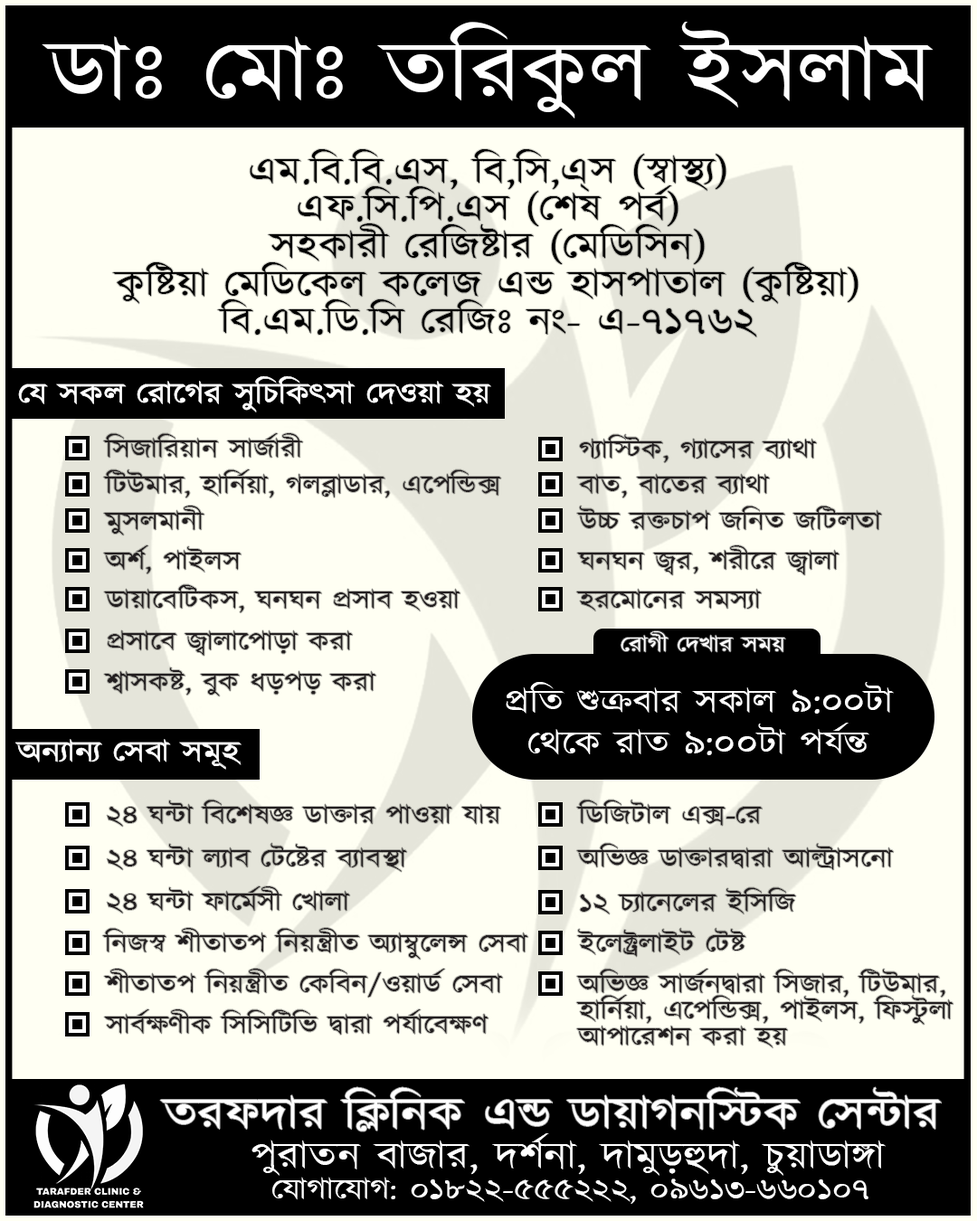
<style>
.page{position:relative;width:977px;height:1221px;background:#fffff3}
.page>*{position:absolute;margin:0}
.t1{font:86.7px "Kalpurush";color:#ffffff;scale:1.16 1}
.t2{font:37.7px/37.7px "Kalpurush";color:#000000;scale:1.16 1}
.t3{font:30.1px "Kalpurush";color:#ffffff;scale:1.16 1}
.t4{font:26.4px "Kalpurush";color:#231f20;scale:1.16 1}
.t5{font:22.6px "Kalpurush";color:#ffffff;scale:1.16 1}
.t6{font:33.9px/41.4px "Kalpurush";color:#ffffff;scale:1.16 1}
.t7{font:26.4px/26.4px "Kalpurush";color:#231f20;scale:1.16 1}
.t8{font:45.2px "Kalpurush";color:#ffffff;scale:1.16 1}
.t9{font:37.7px "Kalpurush";color:#ffffff;scale:1.16 1}
</style>
<div class="page">
<p class="t1" style="left:42px;top:22px;width:891px;height:96px">ডাঃ মোঃ তরিকুল ইসলাম</p>
<p class="t2" style="left:112px;top:149px;width:746px;height:188px;text-align:center">এম.বি.বি.এস, বি,সি,এ্স (স্বাস্থ্য)<br>এফ.সি.পি.এস (শেষ পর্ব)<br>সহকারী রেজিষ্টার (মেডিসিন)<br>কুষ্টিয়া মেডিকেল কলেজ এন্ড হাসপাতাল (কুষ্টিয়া)<br>বি.এম.ডি.সি রেজিঃ নং- এ-৭১৭৬২</p>
<p class="t3" style="left:18px;top:375px;width:473px;height:38px">যে সকল রোগের সুচিকিৎসা দেওয়া হয়</p>
<p class="t4" style="left:103px;top:433px;width:200px;height:25px">সিজারিয়ান সার্জারী</p>
<p class="t4" style="left:579px;top:434px;width:238px;height:29px">গ্যাস্টিক, গ্যাসের ব্যাথা</p>
<p class="t4" style="left:103px;top:469px;width:398px;height:29px">টিউমার, হার্নিয়া, গলব্লাডার, এপেন্ডিক্স</p>
<p class="t4" style="left:576px;top:474px;width:194px;height:24px">বাত, বাতের ব্যাথা</p>
<p class="t4" style="left:103px;top:506px;width:101px;height:29px">মুসলমানী</p>
<p class="t4" style="left:576px;top:506px;width:306px;height:24px">উচ্চ রক্তচাপ জনিত জটিলতা</p>
<p class="t4" style="left:103px;top:545px;width:138px;height:29px">অর্শ, পাইলস</p>
<p class="t4" style="left:577px;top:545px;width:262px;height:30px">ঘনঘন জ্বর, শরীরে জ্বালা</p>
<p class="t4" style="left:104px;top:584px;width:356px;height:29px">ডায়াবেটিকস, ঘনঘন প্রসাব হওয়া</p>
<p class="t4" style="left:576px;top:589px;width:185px;height:22px">হরমোনের সমস্যা</p>
<p class="t4" style="left:108px;top:630px;width:245px;height:26px">প্রসাবে জ্বালাপোড়া করা</p>
<p class="t5" style="left:620px;top:631px;width:166px;height:21px">রোগী দেখার সময়</p>
<p class="t4" style="left:104px;top:667px;width:272px;height:29px">শ্বাসকষ্ট, বুক ধড়পড় করা</p>
<p class="t6" style="left:506px;top:682px;width:388px;height:73px;text-align:center">প্রতি শুক্রবার সকাল ৯:০০টা<br>থেকে রাত ৯:০০টা পর্যন্ত</p>
<p class="t3" style="left:15px;top:739px;width:226px;height:31px">অন্যান্য সেবা সমূহ</p>
<p class="t4" style="left:107px;top:799px;width:394px;height:28px">২৪ ঘন্টা বিশেষজ্ঞ ডাক্তার পাওয়া যায়</p>
<p class="t4" style="left:576px;top:799px;width:186px;height:27px">ডিজিটাল এক্স-রে</p>
<p class="t4" style="left:107px;top:843px;width:300px;height:29px">২৪ ঘন্টা ল্যাব টেষ্টের ব্যাবস্থা</p>
<p class="t4" style="left:576px;top:843px;width:318px;height:27px">অভিজ্ঞ ডাক্তারদ্বারা আল্ট্রাসনো</p>
<p class="t4" style="left:107px;top:886px;width:243px;height:27px">২৪ ঘন্টা ফার্মেসী খোলা</p>
<p class="t4" style="left:580px;top:887px;width:216px;height:27px">১২ চ্যানেলের ইসিজি</p>
<p class="t4" style="left:102px;top:928px;width:426px;height:32px">নিজস্ব শীতাতপ নিয়ন্ত্রীত অ্যাম্বুলেন্স সেবা</p>
<p class="t4" style="left:577px;top:928px;width:169px;height:29px">ইলেক্ট্রলাইট টেষ্ট</p>
<p class="t4" style="left:104px;top:969px;width:399px;height:29px">শীতাতপ নিয়ন্ত্রীত কেবিন/ওয়ার্ড সেবা</p>
<p class="t7" style="left:576px;top:969px;width:377px;height:79px">অভিজ্ঞ সার্জনদ্বারা সিজার, টিউমার,<br>হার্নিয়া, এপেন্ডিক্স, পাইলস, ফিস্টুলা <br>আপারেশন করা হয়</p>
<p class="t4" style="left:104px;top:1009px;width:384px;height:26px">সার্বক্ষণীক সিসিটিভি দ্বারা পর্যাবেক্ষণ</p>
<p class="t8" style="left:160px;top:1087px;width:781px;height:44px">তরফদার ক্লিনিক এন্ড ডায়াগনস্টিক সেন্টার</p>
<p class="t9" style="left:251px;top:1133px;width:634px;height:43px">পুরাতন বাজার, দর্শনা, দামুড়হুদা, চুয়াডাঙ্গা</p>
<p class="t3" style="left:272px;top:1177px;width:596px;height:27px">যোগাযোগ: ০১৮২২-৫৫৫২২২, ০৯৬১৩-৬৬০১০৭</p>
</div>
